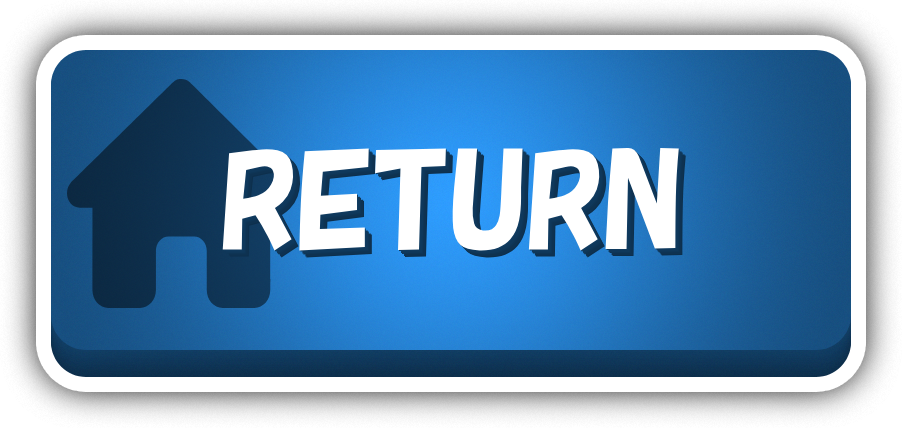
<style>
.page{position:relative;width:902px;height:429px}
.page>*{position:absolute;margin:0}
.t1{font:125px "HGPSoeiKakupoptai";color:#ffffff}
</style>
<div class="page">
<p class="t1" style="left:222px;top:147px;width:457px;height:104px">RETURN</p>
</div>
